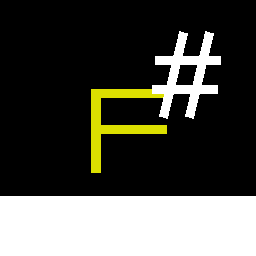
<style>
.page{position:relative;width:256px;height:256px;background:#000000}
.page>*{position:absolute;margin:0}
.t1{font:112px "Michroma";color:#ffffff}
.t2{font:112px "Michroma";color:#dcdf00}
</style>
<div class="page">
<p class="t1" style="left:152px;top:31px;width:69px;height:88px">#</p>
<p class="t2" style="left:91px;top:89px;width:79px;height:84px">F</p>
</div>
